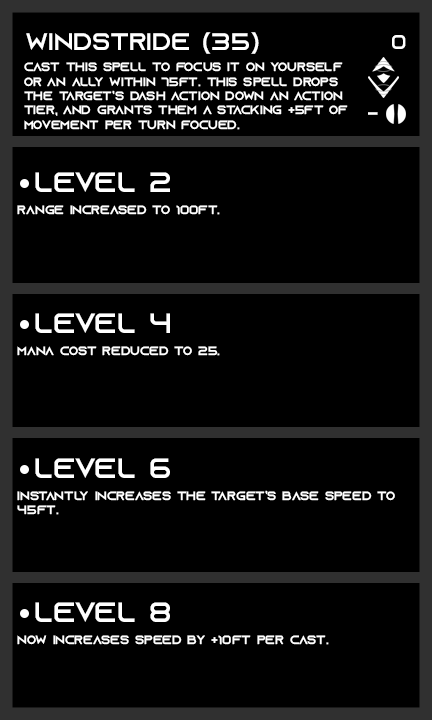
<style>
.page{position:relative;width:432px;height:720px;background:#000000}
.page>*{position:absolute;margin:0}
.t1{font:24px "AzonixRegular";color:#ffffff}
.t2{font:20px "AzonixRegular";color:#ffffff}
.t3{font:12px "AzonixRegular";color:#ffffff}
.t4{font:28px "AzonixRegular";color:#ffffff}
</style>
<div class="page">
<p class="t1" style="left:26px;top:32px;width:233px;height:22px">windstride (35)</p>
<p class="t2" style="left:392px;top:35px;width:14px;height:14px">0</p>
<p class="t3" style="left:24px;top:62px;width:324px;height:68px">cast this spell to focus it on yourself<br>or an ally within 75ft. this spell drops <br>the target’s dash action down an action <br>tier, and grants them a stacking +5ft of <br>movement per turn focued.</p>
<p class="t2" style="left:368px;top:112px;width:10px;height:3px">-</p>
<p class="t4" style="left:35px;top:172px;width:135px;height:20px">level 2</p>
<p class="t3" style="left:17px;top:205px;width:203px;height:10px">range increased to 100ft.</p>
<p class="t4" style="left:35px;top:313px;width:135px;height:20px">level 4</p>
<p class="t3" style="left:17px;top:346px;width:203px;height:10px">mana cost reduced to 25.</p>
<p class="t4" style="left:35px;top:458px;width:135px;height:20px">level 6</p>
<p class="t3" style="left:17px;top:490px;width:378px;height:25px">instantly increases the target’s base speed to<br>45ft.</p>
<p class="t4" style="left:35px;top:602px;width:135px;height:20px">level 8</p>
<p class="t3" style="left:17px;top:635px;width:312px;height:10px">now increases speed by +10ft per cast.</p>
</div>
